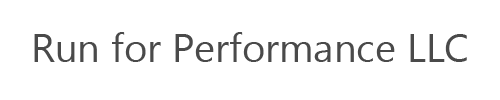
<style>
.page{position:relative;width:500px;height:100px;background:#ffffff}
.page>*{position:absolute;margin:0}
.t1{font:40px "Gadugi";color:#4a4a4a}
</style>
<div class="page">
<p class="t1" style="left:34px;top:32px;width:433px;height:30px">Run for Performance LLC</p>
</div>
